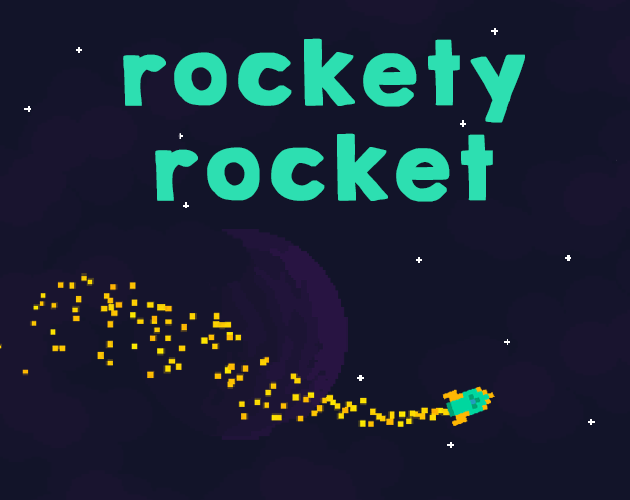
<style>
.page{position:relative;width:630px;height:500px;background:#121429}
.page>*{position:absolute;margin:0}
.t1{font:79.2px "KGHAPPYSolid";color:#2ddfb1;font-weight:bold}
</style>
<div class="page">
<p class="t1" style="left:123px;top:38px;width:402px;height:164px;text-align:center">rockety<br>rocket</p>
</div>
